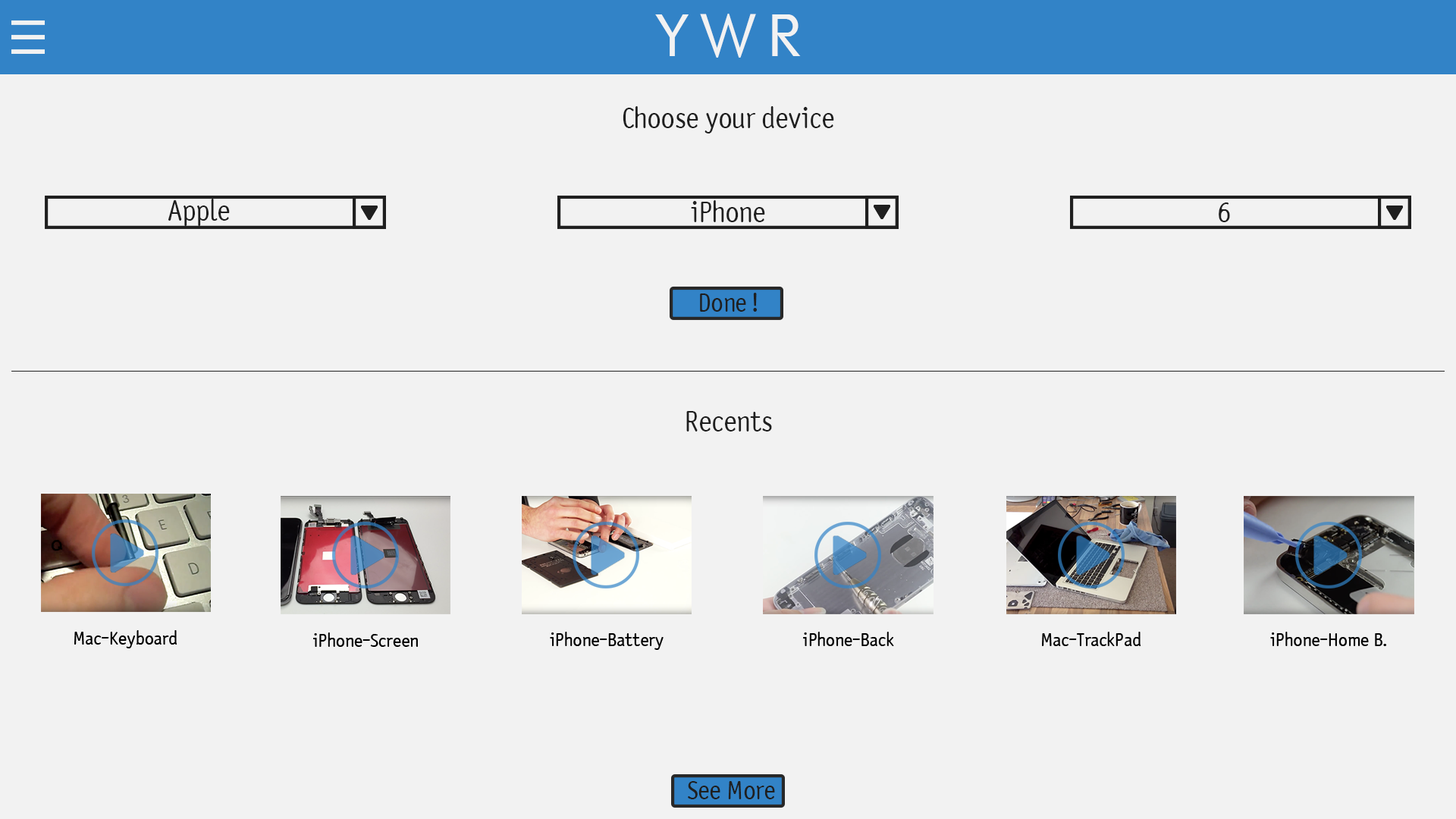
<style>
.page{position:relative;width:1456px;height:819px;background:#f2f2f2}
.page>*{position:absolute;margin:0}
.t1{font:56.9px "FuturistFixedWidth-Regular";letter-spacing:-0.02em;color:#f2f2f2}
.t2{font:28.4px "SaturdaySansICG";letter-spacing:-0.02em;color:#1f1f1f}
.t3{font:25.3px "SaturdaySansICG";letter-spacing:-0.02em;color:#1f1f1f}
</style>
<div class="page">
<p class="t1" style="left:655px;top:14px;width:146px;height:44px">YWR</p>
<p class="t2" style="left:623px;top:106px;width:211px;height:27px">Choose your device</p>
<p class="t2" style="left:168px;top:199px;width:62px;height:27px">Apple</p>
<p class="t2" style="left:691px;top:200px;width:74px;height:22px">iPhone</p>
<p class="t2" style="left:1219px;top:202px;width:11px;height:20px">6</p>
<p class="t3" style="left:700px;top:293px;width:57px;height:19px">Done !</p>
<p class="t2" style="left:686px;top:411px;width:86px;height:20px">Recents</p>
<p class="t3" style="left:688px;top:781px;width:87px;height:18px">See More</p>
</div>
